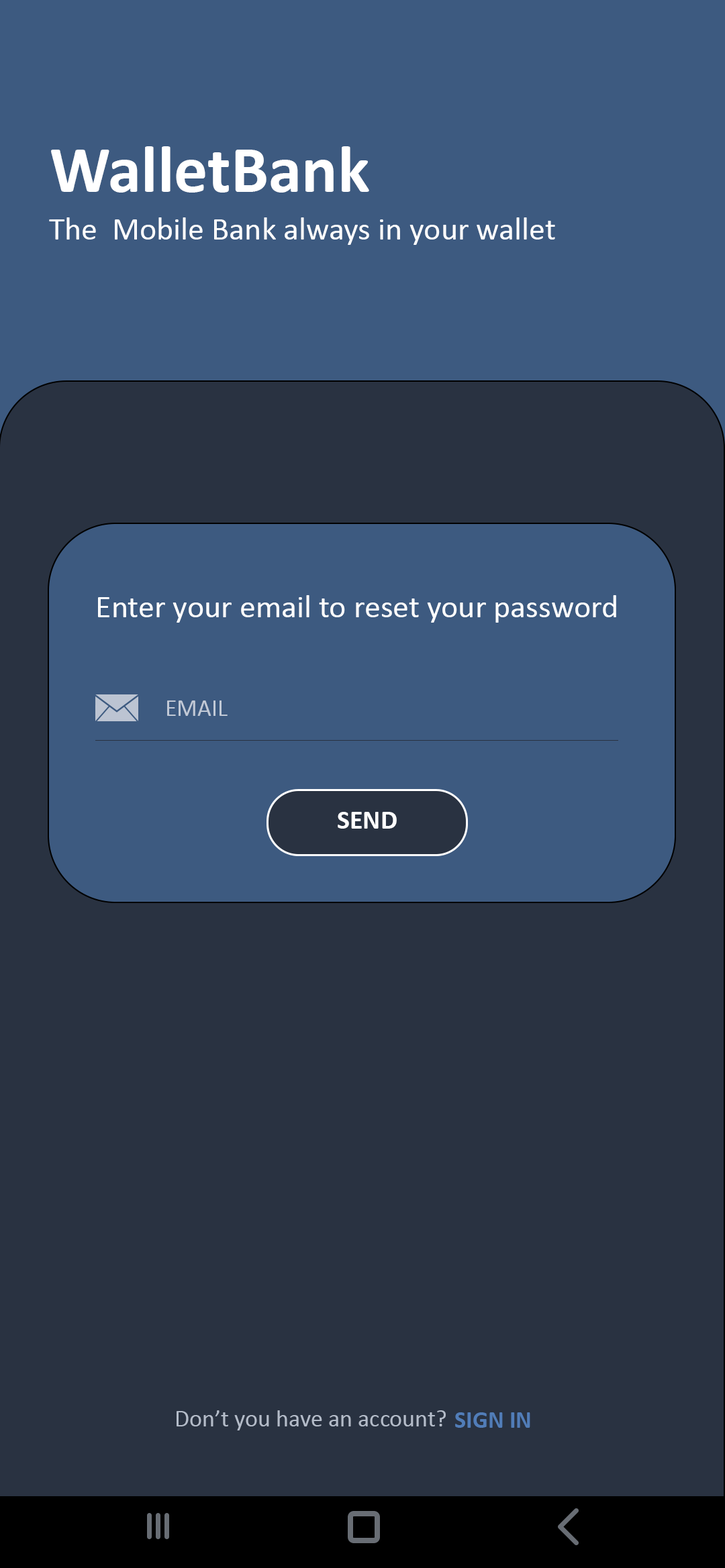
<style>
.page{position:relative;width:725px;height:1568px;background:#293241}
.page>*{position:absolute;margin:0}
.t1{font:67.1px "Calibri-Bold";color:#ffffff}
.t2{font:32.2px "Calibri";color:#ffffff}
.t3{font:24.2px "Calibri";color:#c1c9d6}
.t4{font:26.8px "Calibri-Bold";color:#ffffff}
.t5{font:24.2px "Calibri";color:#b4bcc9}
.t6{font:24.2px "Calibri-Bold";color:#517db8}
</style>
<div class="page">
<p class="t1" style="left:51px;top:146px;width:318px;height:47px">WalletBank</p>
<p class="t2" style="left:49px;top:217px;width:506px;height:28px">The  Mobile Bank always in your wallet</p>
<p class="t2" style="left:98px;top:595px;width:518px;height:28px">Enter your email to reset your password</p>
<p class="t3" style="left:167px;top:700px;width:60px;height:16px">EMAIL</p>
<p class="t4" style="left:337px;top:812px;width:60px;height:17px">SEND</p>
<p class="t5" style="left:176px;top:1410px;width:270px;height:20px">Don’t you have an account?</p>
<p class="t6" style="left:455px;top:1412px;width:75px;height:16px">SIGN IN</p>
</div>
